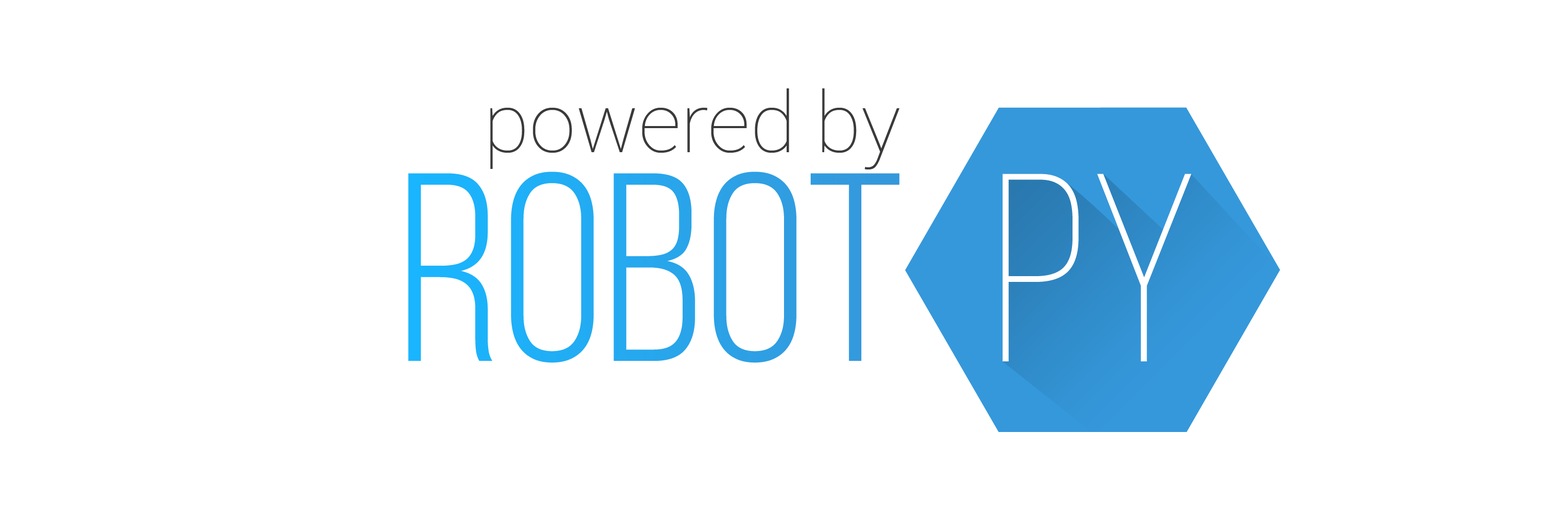
<style>
.page{position:relative;width:1568px;height:523px;background:#ffffff}
.page>*{position:absolute;margin:0}
.t1{font:83.6px "Roboto-Thin";color:#3a3a3a}
.t2{font:267.6px "BebasNeueBook";color:#25a9ef}
.t3{font:267.6px "BebasNeueLight";color:#ffffff}
</style>
<div class="page">
<p class="t1" style="left:490px;top:88px;width:410px;height:81px">powered by</p>
<p class="t2" style="left:408px;top:171px;width:492px;height:192px">ROBOT</p>
<p class="t3" style="left:1002px;top:174px;width:190px;height:187px">PY</p>
</div>
